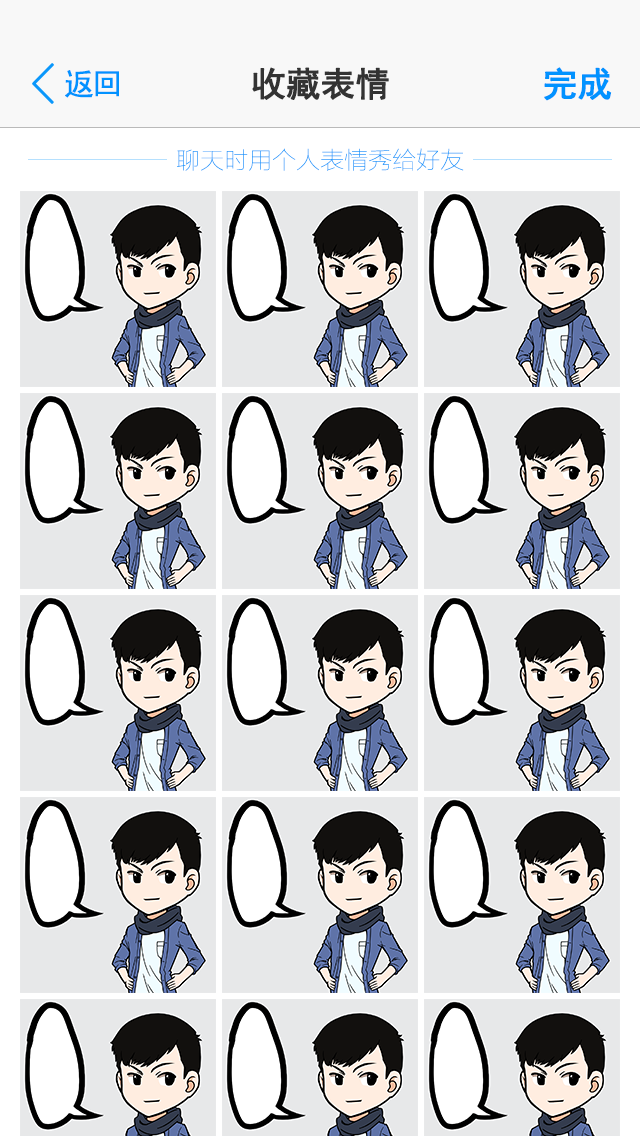
<style>
.page{position:relative;width:640px;height:1136px;background:#e7e8e9}
.page>*{position:absolute;margin:0}
.t1{font:30px "SimHei";letter-spacing:-0.075em;color:#0192ff;font-weight:bold}
.t2{font:34px "SimHei";letter-spacing:-0.01em;color:#333333;font-weight:bold}
.t3{font:34px "SimHei";letter-spacing:-0.01em;color:#0192ff;font-weight:bold}
.t4{font:24px "FZLTCXHJW--GB1-0";color:#0a97fb}
</style>
<div class="page">
<p class="t1" style="left:65px;top:70px;width:54px;height:28px">返回</p>
<p class="t2" style="left:252px;top:67px;width:137px;height:33px">收藏表情</p>
<p class="t3" style="left:544px;top:67px;width:68px;height:34px">完成</p>
<p class="t4" style="left:177px;top:148px;width:287px;height:23px">聊天时用个人表情秀给好友</p>
</div>
